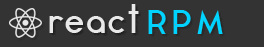
<style>
.page{position:relative;width:264px;height:47px;background:#333333}
.page>*{position:absolute;margin:0}
.t1{font:33.2px "AquaGrotesque";letter-spacing:-0.025em;color:#e9e9e9}
.t2{font:33.2px "AquaGrotesque";letter-spacing:0.075em;color:#00d3ff}
</style>
<div class="page">
<p class="t1" style="left:49px;top:4px;width:90px;height:29px">react</p>
<p class="t2" style="left:148px;top:10px;width:75px;height:24px">RPM</p>
</div>
